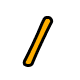
<style>
.page{position:relative;width:80px;height:80px;background:#ffffff}
.page>*{position:absolute;margin:0}
.t1{font:60px "Herculanum";color:#ffae00;font-weight:bold}
</style>
<div class="page">
<p class="t1" style="left:25px;top:19px;width:26px;height:45px">/</p>
</div>
